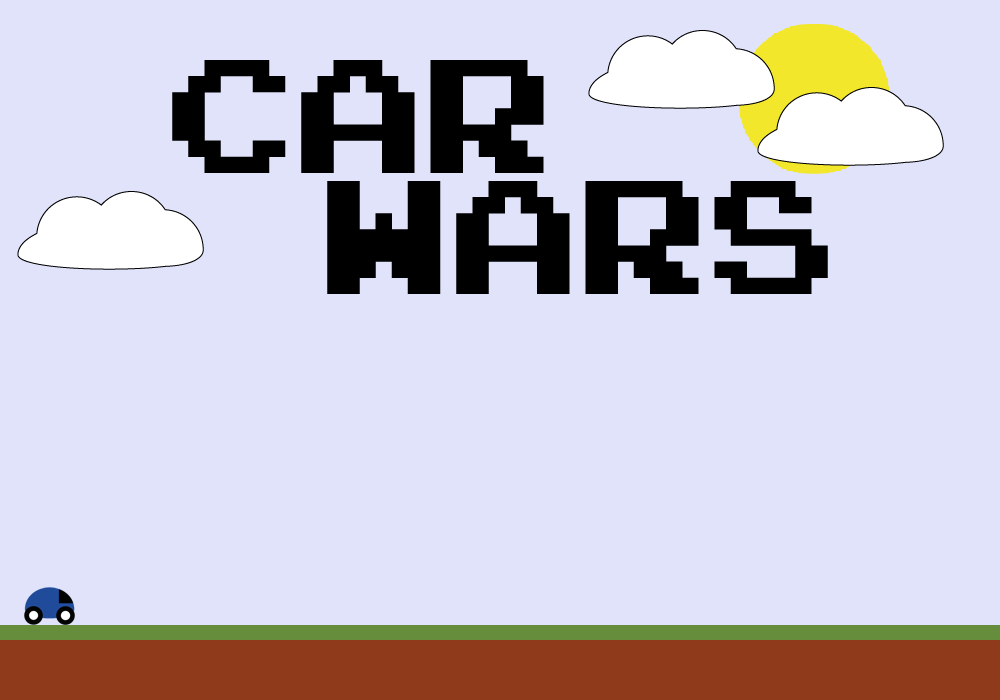
<style>
.page{position:relative;width:1000px;height:700px;background:#e0e3fa}
.page>*{position:absolute;margin:0}
.t1{font:129.1px "PressStart2P-Regular";color:#000000}
</style>
<div class="page">
<p class="t1" style="left:172px;top:60px;width:372px;height:113px">CAR</p>
<p class="t1" style="left:327px;top:181px;width:501px;height:113px">WARS</p>
</div>
